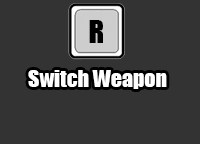
<style>
.page{position:relative;width:200px;height:144px;background:#333333}
.page>*{position:absolute;margin:0}
.t1{font:29.3px "Impact";color:#000000}
.t2{font:21.9px "Impact";color:#ffffff}
</style>
<div class="page">
<p class="t1" style="left:89px;top:20px;width:14px;height:23px">R</p>
<p class="t2" style="left:28px;top:70px;width:139px;height:19px">Switch Weapon</p>
</div>
